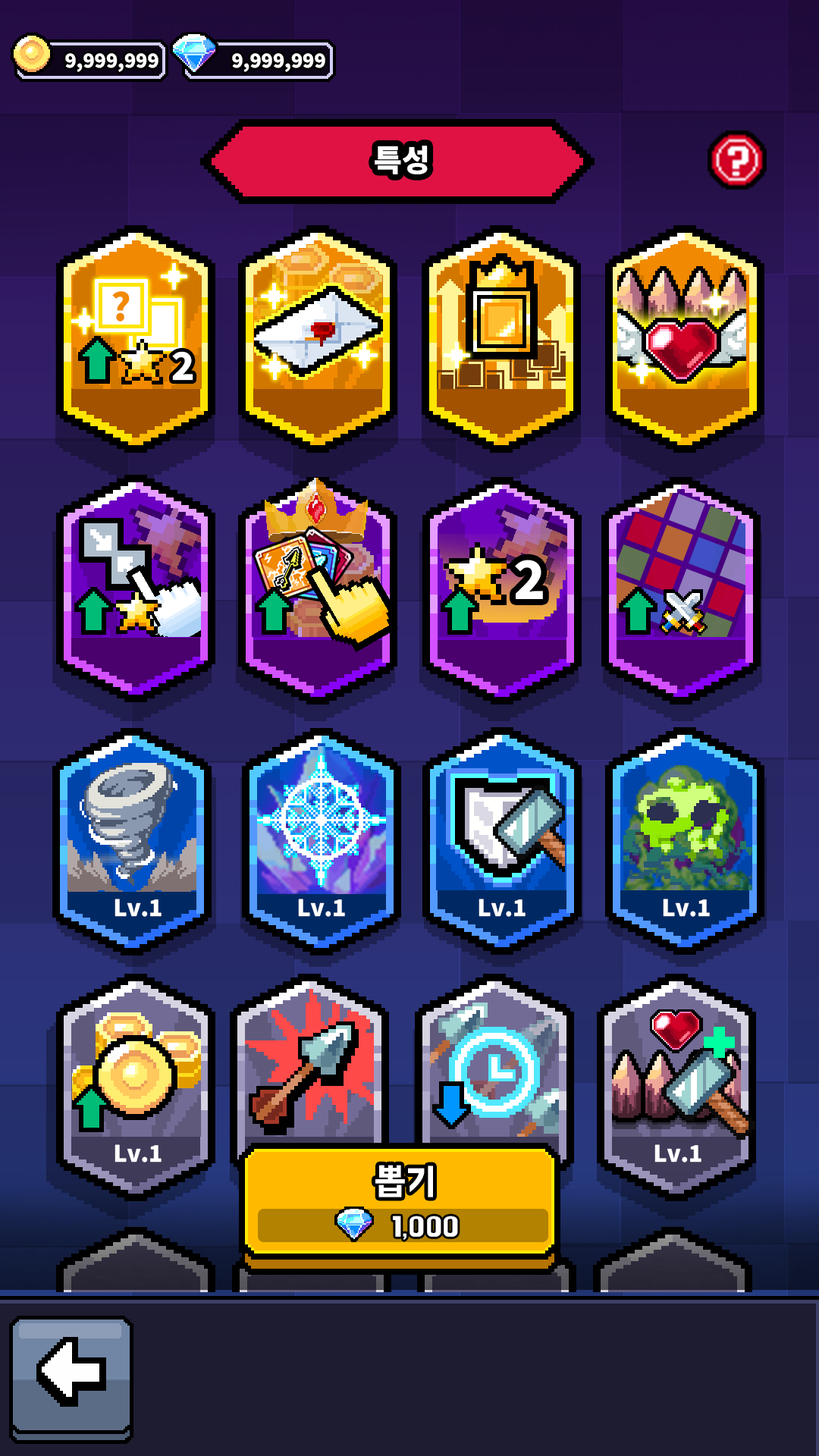
<style>
.page{position:relative;width:819px;height:1456px}
.page>*{position:absolute;margin:0}
.t1{font:19px "NotoSansKR-Black";color:#ffffff}
.t2{font:30.3px "NotoSansKR-Black";color:#ffffff}
.t3{font:37.7px "NotoSansKR-Black";color:#f28a01}
.t4{font:38px "NotoSansKR-Black";color:#ffffff}
.t5{font:52.6px "NotoSansKR-Black";color:#ffffff}
.t6{font:22.7px "NotoSansKR-Black";color:#ffffff}
.t7{font:37.4px "BMHANNAProOTF";color:#ffffff}
.t8{font:28.1px "BMHANNAProOTF";color:#ffffff}
</style>
<div class="page">
<p class="t1" style="left:65px;top:53px;width:93px;height:19px">9,999,999</p>
<p class="t1" style="left:232px;top:53px;width:93px;height:19px">9,999,999</p>
<p class="t2" style="left:375px;top:146px;width:53px;height:28px">특성</p>
<p class="t3" style="left:112px;top:291px;width:18px;height:31px">?</p>
<p class="t4" style="left:172px;top:351px;width:21px;height:30px">2</p>
<p class="t5" style="left:515px;top:560px;width:28px;height:39px">2</p>
<p class="t6" style="left:115px;top:899px;width:47px;height:18px">Lv.1</p>
<p class="t6" style="left:298px;top:899px;width:47px;height:18px">Lv.1</p>
<p class="t6" style="left:479px;top:899px;width:47px;height:18px">Lv.1</p>
<p class="t6" style="left:663px;top:899px;width:47px;height:18px">Lv.1</p>
<p class="t6" style="left:115px;top:1144px;width:47px;height:19px">Lv.1</p>
<p class="t6" style="left:654px;top:1144px;width:47px;height:19px">Lv.1</p>
<p class="t7" style="left:375px;top:1165px;width:58px;height:32px">뽑기</p>
<p class="t8" style="left:393px;top:1216px;width:65px;height:24px">1,000</p>
</div>
